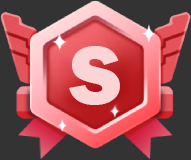
<style>
.page{position:relative;width:191px;height:160px;background:#333333}
.page>*{position:absolute;margin:0}
.t1{font:85px "FranklinGothic-Heavy";letter-spacing:0.075em;color:#fbd5d6}
</style>
<div class="page">
<p class="t1" style="left:69px;top:46px;width:51px;height:59px">S</p>
</div>
